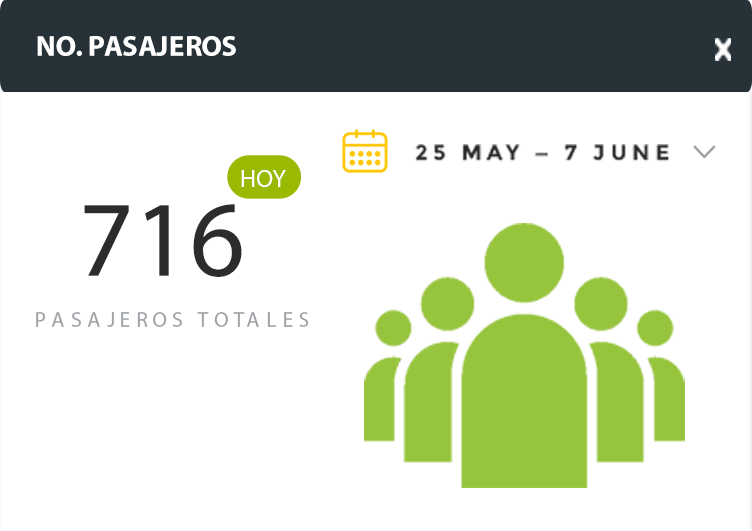
<style>
.page{position:relative;width:752px;height:531px;background:#ffffff}
.page>*{position:absolute;margin:0}
.t1{font:28.8px "MyriadPro-Bold";color:#ffffff}
.t2{font:21.6px "Montserrat-Bold";letter-spacing:0.24em;color:#292929;text-transform:uppercase}
.t3{font:25.2px "MyriadPro-Regular";color:#ffffff;text-transform:uppercase}
.t4{font:108px "MyriadPro-Regular";color:#2c2c2c}
.t5{font:21.6px "MyriadPro-Regular";letter-spacing:0.24em;color:#9fa3a7;text-transform:uppercase}
</style>
<div class="page">
<p class="t1" style="left:37px;top:36px;width:199px;height:20px">NO. PASAJEROS</p>
<p class="t2" style="left:414px;top:144px;width:256px;height:18px">25 may — 7 june</p>
<p class="t3" style="left:241px;top:170px;width:45px;height:17px">hoy</p>
<p class="t4" style="left:84px;top:204px;width:158px;height:73px">716</p>
<p class="t5" style="left:36px;top:312px;width:273px;height:15px">pasajeros totales</p>
</div>
